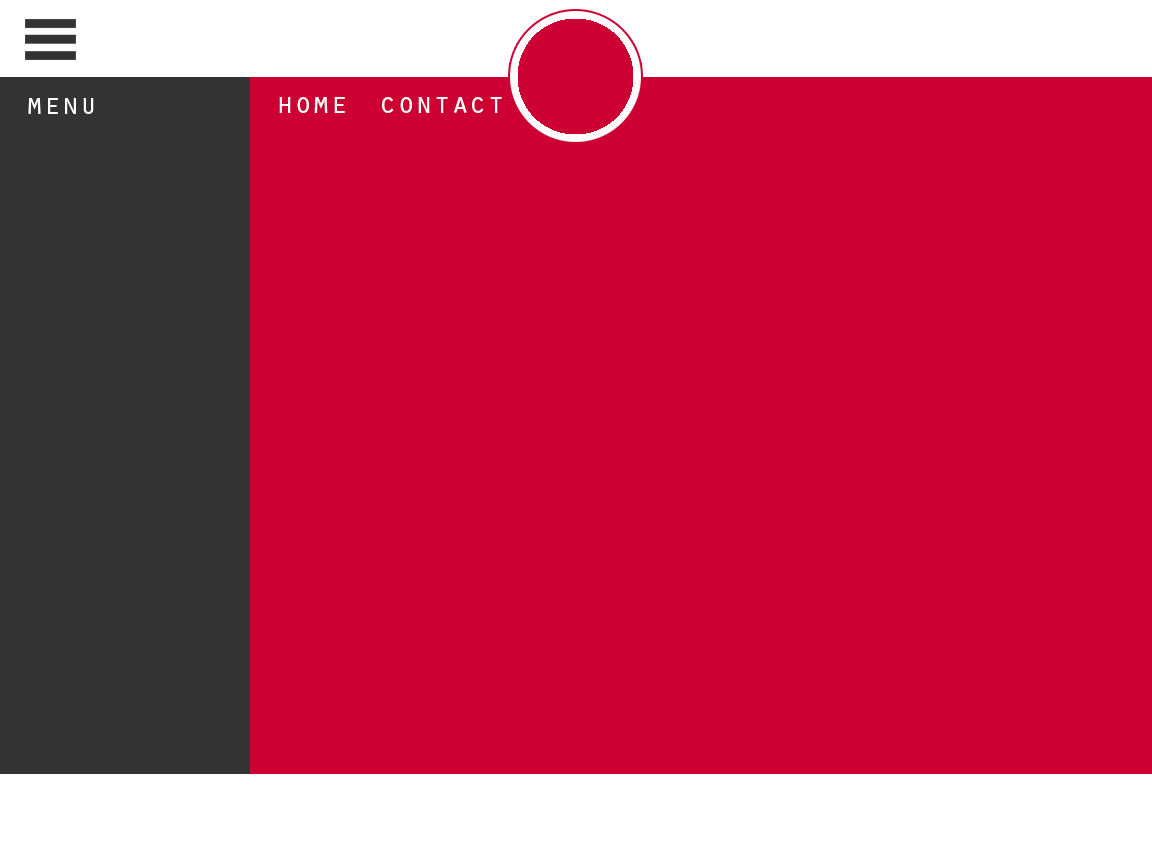
<style>
.page{position:relative;width:1152px;height:864px;background:#cc0033}
.page>*{position:absolute;margin:0}
.t1{font:30px "OratorStd";color:#ffffff}
</style>
<div class="page">
<p class="t1" style="left:28px;top:98px;width:66px;height:16px">menu</p>
<p class="t1" style="left:279px;top:97px;width:66px;height:16px">home</p>
<p class="t1" style="left:382px;top:97px;width:120px;height:16px">contact</p>
</div>
